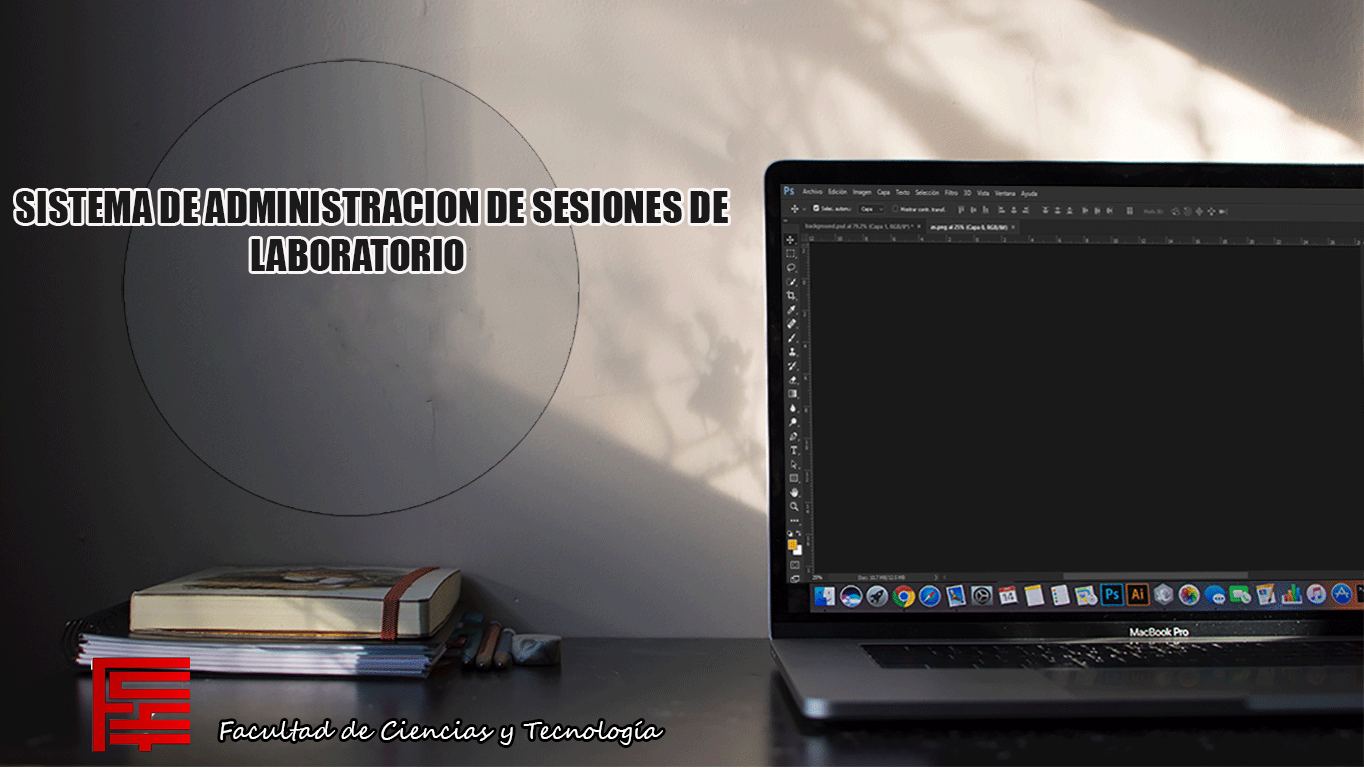
<style>
.page{position:relative;width:1364px;height:768px}
.page>*{position:absolute;margin:0}
.t1{font:40px "Impact";color:#1a1a1a}
.t2{font:24px "SegoeScript";color:#ffffff}
</style>
<div class="page">
<p class="t1" style="left:16px;top:191px;width:712px;height:80px;text-align:center">SISTEMA DE ADMINISTRACION DE SESIONES DE <br>LABORATORIO</p>
<p class="t2" style="left:220px;top:721px;width:443px;height:24px">Facultad de Ciencias y Tecnología</p>
</div>
